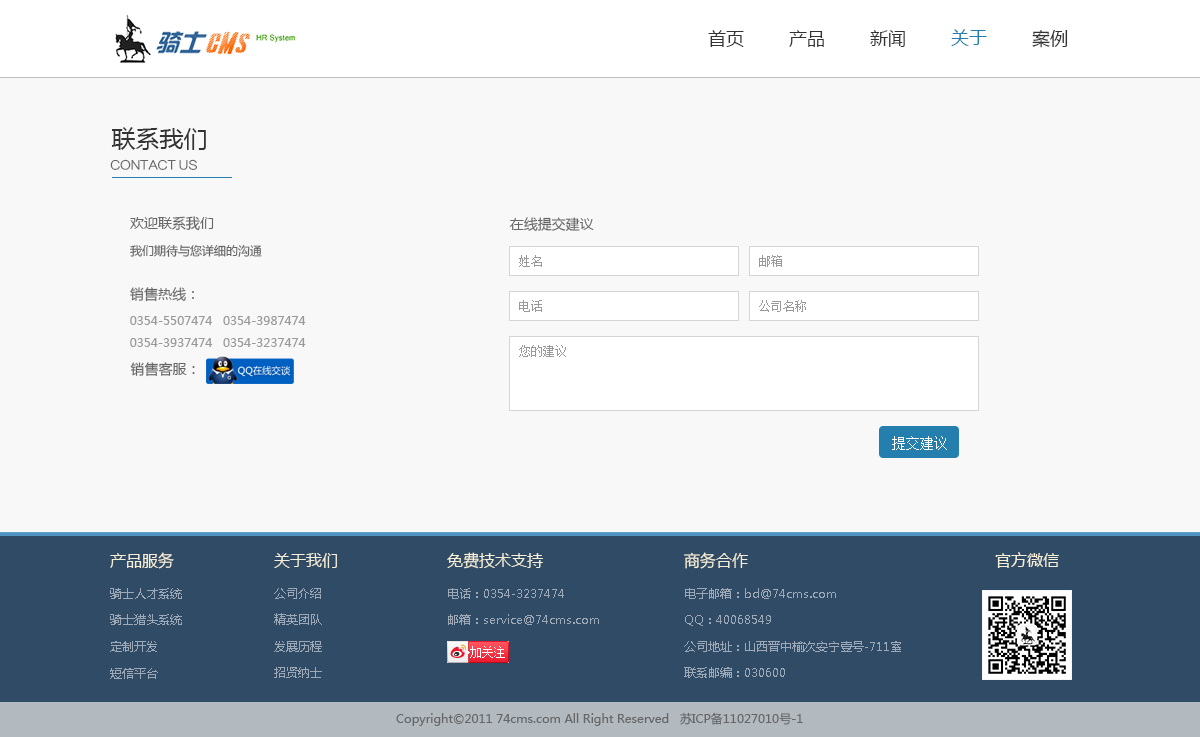
<style>
.page{position:relative;width:1200px;height:737px;background:#f8f8f8}
.page>*{position:absolute;margin:0}
.t1{font:18px "MicrosoftYaHei";color:#333333}
.t2{font:18px "MicrosoftYaHei";color:#247faf}
.t3{font:24px "MicrosoftYaHei";color:#333333}
.t4{font:12px "FZLTCXHJW--GB1-0";letter-spacing:-0.05em;color:#666666;font-weight:bold}
.t5{font:14px "MicrosoftYaHei";color:#666666}
.t6{font:12px "MicrosoftYaHei";color:#666666}
.t7{font:12px "SimSun";color:#999999}
.t8{font:12px/22px "MicrosoftYaHei";color:#999999}
.t9{font:14px/22px "MicrosoftYaHei";color:#666666}
.t10{font:14px "SimSun";color:#ffffff}
.t11{font:16px "MicrosoftYaHei";color:#f6eed7}
.t12{font:12px "MicrosoftYaHei";color:#9da9b7}
</style>
<div class="page">
<p class="t1" style="left:708px;top:30px;width:36px;height:17px">首页</p>
<p class="t1" style="left:789px;top:30px;width:35px;height:17px">产品</p>
<p class="t1" style="left:870px;top:30px;width:35px;height:17px">新闻</p>
<p class="t2" style="left:951px;top:29px;width:36px;height:17px">关于</p>
<p class="t1" style="left:1032px;top:30px;width:36px;height:18px">案例</p>
<p class="t3" style="left:111px;top:127px;width:95px;height:23px">联系我们</p>
<p class="t4" style="left:110px;top:159px;width:87px;height:11px">CONTACT US</p>
<p class="t5" style="left:130px;top:216px;width:84px;height:15px">欢迎联系我们</p>
<p class="t5" style="left:509px;top:217px;width:85px;height:14px">在线提交建议</p>
<p class="t6" style="left:130px;top:244px;width:132px;height:13px">我们期待与您详细的沟通</p>
<p class="t7" style="left:519px;top:255px;width:23px;height:12px">姓名</p>
<p class="t7" style="left:759px;top:255px;width:23px;height:12px">邮箱</p>
<p class="t5" style="left:130px;top:287px;width:64px;height:15px">销售热线：</p>
<p class="t7" style="left:519px;top:300px;width:23px;height:12px">电话</p>
<p class="t7" style="left:759px;top:300px;width:47px;height:12px">公司名称</p>
<p class="t8" style="left:130px;top:316px;width:176px;height:31px"><span class="t9"><br></span>0354-5507474   0354-3987474   0354-3937474   0354-3237474</p>
<p class="t7" style="left:519px;top:345px;width:47px;height:12px">您的建议</p>
<p class="t5" style="left:130px;top:362px;width:65px;height:15px">销售客服：</p>
<p class="t10" style="left:892px;top:436px;width:55px;height:14px">提交建议</p>
<p class="t11" style="left:110px;top:552px;width:64px;height:17px">产品服务</p>
<p class="t11" style="left:274px;top:553px;width:63px;height:15px">关于我们</p>
<p class="t11" style="left:447px;top:552px;width:96px;height:17px">免费技术支持</p>
<p class="t11" style="left:684px;top:552px;width:64px;height:17px">商务合作</p>
<p class="t11" style="left:995px;top:552px;width:64px;height:16px">官方微信</p>
<p class="t12" style="left:110px;top:588px;width:72px;height:11px">骑士人才系统</p>
<p class="t12" style="left:274px;top:588px;width:47px;height:11px">公司介绍</p>
<p class="t12" style="left:448px;top:588px;width:116px;height:11px">电话：0354-3237474</p>
<p class="t12" style="left:685px;top:588px;width:151px;height:11px">电子邮箱：bd@74cms.com</p>
<p class="t12" style="left:110px;top:614px;width:72px;height:11px">骑士猎头系统</p>
<p class="t12" style="left:274px;top:613px;width:48px;height:12px">精英团队</p>
<p class="t12" style="left:448px;top:614px;width:151px;height:11px">邮箱：service@74cms.com</p>
<p class="t12" style="left:685px;top:615px;width:86px;height:11px">QQ：40068549</p>
<p class="t12" style="left:110px;top:641px;width:47px;height:11px">定制开发</p>
<p class="t12" style="left:274px;top:641px;width:48px;height:11px">发展历程</p>
<p class="t12" style="left:684px;top:641px;width:217px;height:11px">公司地址：山西晋中榆次安宁壹号-711室</p>
<p class="t12" style="left:110px;top:668px;width:48px;height:11px">短信平台</p>
<p class="t12" style="left:274px;top:667px;width:48px;height:11px">招贤纳士</p>
<p class="t12" style="left:684px;top:667px;width:101px;height:11px">联系邮编：030600</p>
<p class="t6" style="left:396px;top:712px;width:407px;height:14px">Copyright©2011 74cms.com All Right Reserved   苏ICP备11027010号-1</p>
</div>
